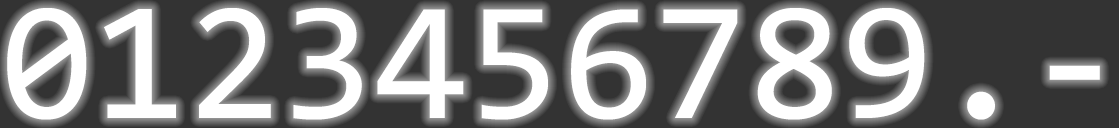
<style>
.page{position:relative;width:1119px;height:128px;background:#333333}
.page>*{position:absolute;margin:0}
.t1{font:170.1px "Consolas";color:#ffffff}
</style>
<div class="page">
<p class="t1" style="left:7px;top:8px;width:1093px;height:112px">0123456789.-</p>
</div>
